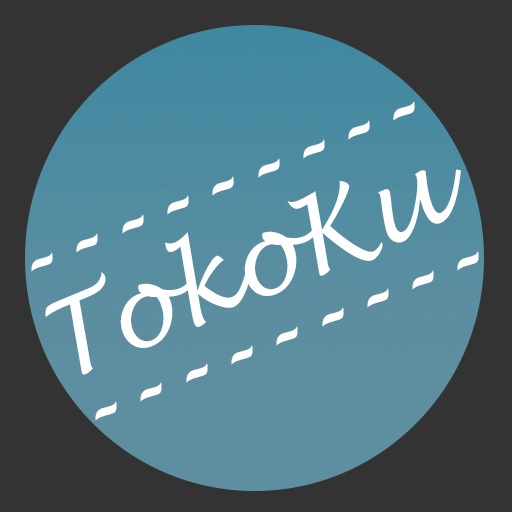
<style>
.page{position:relative;width:512px;height:512px;background:#333333}
.page>*{position:absolute;margin:0}
.t1{font:105.7px "LucidaHandwriting-Italic";color:#fefefe;scale:0.96 1}
</style>
<div class="page">
<p class="t1" style="left:31px;top:101px;width:384px;height:171px;rotate:-23deg">---------</p>
<p class="t1" style="left:45px;top:169px;width:416px;height:206px;rotate:-23deg">TokoKu</p>
<p class="t1" style="left:95px;top:251px;width:384px;height:170px;rotate:-23deg">---------</p>
</div>
